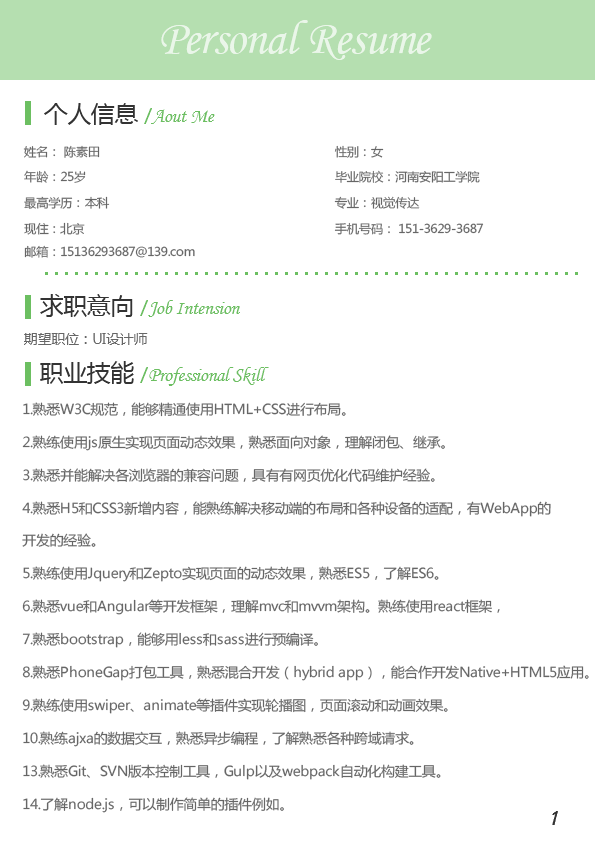
<style>
.page{position:relative;width:595px;height:842px;background:#ffffff}
.page>*{position:absolute;margin:0}
.t1{font:48px "STLiti";letter-spacing:-0.02em;color:#ffffff}
.t2{font:20px "STLiti";letter-spacing:-0.02em;color:#6cbf61}
.t3{font:24px "MicrosoftYaHei";letter-spacing:-0.02em;color:#333333}
.t4{font:18px "MicrosoftYaHei";letter-spacing:-0.02em;color:#6cbf61}
.t5{font:12px/25.2px "MicrosoftYaHei";letter-spacing:-0.02em;color:#666666}
.t6{font:12px/26px "MicrosoftYaHei";letter-spacing:-0.02em;color:#666666}
.t7{font:12px/23.5px "MicrosoftYaHei";letter-spacing:-0.02em;color:#666666}
.t8{font:14px "MicrosoftYaHei";letter-spacing:-0.02em;color:#666666}
.t9{font:13.6px/32.9px "MicrosoftYaHei";letter-spacing:-0.02em;color:#666666;scale:1.03 1}
.t10{font:18px "Freehand521BT-RegularC";letter-spacing:-0.02em;color:#333333}
</style>
<div class="page">
<p class="t1" style="left:161px;top:20px;width:271px;height:40px;opacity:0.7">Personal Resume</p>
<p class="t2" style="left:44px;top:103px;width:171px;height:22px"><span class="t3">个人信息 </span><span class="t4">/</span>Aout Me</p>
<p class="t5" style="left:23px;top:145px;width:461px;height:113px">姓名： 陈素田             性别：女                                       <br>年龄：25岁         毕业院校：河南安阳工学院                   <br>最高学历：本科         专业：视觉传达                <span class="t6">                               <br>现住：北京                                   </span><span class="t7">                            手机号码： 151-3629-3687                                         <br>邮箱：15136293687@139.com</span></p>
<p class="t2" style="left:40px;top:294px;width:200px;height:23px"><span class="t3">求职意向 </span><span class="t4">/</span>Job Intension</p>
<p class="t8" style="left:24px;top:333px;width:124px;height:12px">期望职位：UI设计师</p>
<p class="t2" style="left:40px;top:361px;width:229px;height:25px"><span class="t3">职业技能 </span><span class="t4">/</span>Professional Skill</p>
<p class="t9" style="left:22px;top:402px;width:567px;height:411px">1.熟悉W3C规范，能够精通使用HTML+CSS进行布局。<br>2.熟练使用js原生实现页面动态效果，熟悉面向对象，理解闭包、继承。<br>3.熟悉并能解决各浏览器的兼容问题，具有有网页优化代码维护经验。<br>4.熟悉H5和CSS3新增内容，能熟练解决移动端的布局和各种设备的适配，有WebApp的<br>开发的经验。<br>5.熟练使用Jquery和Zepto实现页面的动态效果，熟悉ES5，了解ES6。<br>6.熟悉vue和Angular等开发框架，理解mvc和mvvm架构。熟练使用react框架，<br>7.熟悉bootstrap，能够用less和sass进行预编译。<br>8.熟悉PhoneGap打包工具，熟悉混合开发（hybrid app），能合作开发Native+HTML5应用。<br>9.熟练使用swiper、animate等插件实现轮播图，页面滚动和动画效果。<br>10.熟练ajxa的数据交互，熟悉异步编程，了解熟悉各种跨域请求。<br>13.熟悉Git、SVN版本控制工具，Gulp以及webpack自动化构建工具。<br>14.了解node.js，可以制作简单的插件例如。</p>
<p class="t10" style="left:552px;top:811px;width:6px;height:14px">1</p>
</div>
